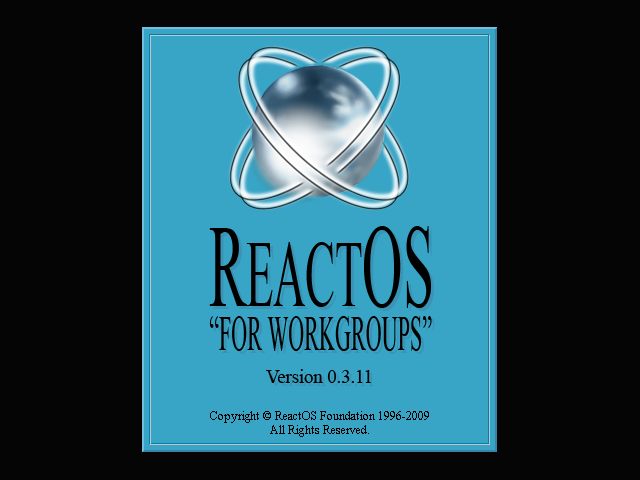
<style>
.page{position:relative;width:640px;height:480px;background:#050505}
.page>*{position:absolute;margin:0}
.t1{font:94.6px "TimesNewRomanPSMT";color:#000000;scale:0.47 1}
.t2{font:118.1px "TimesNewRomanPSMT";color:#000000;scale:0.47 1}
.t3{font:49.8px "TimesNewRomanPSMT";color:#000000;scale:0.44 1}
.t4{font:19.9px "TimesNewRomanPSMT";color:#000000;scale:0.93 1}
.t5{font:13px/13.9px "TimesNewRomanPSMT";color:#000000;scale:0.93 1}
</style>
<div class="page">
<p class="t1" style="left:209px;top:226px;width:222px;height:82px"><span class="t2">R</span>EACT<span class="t2">OS</span></p>
<p class="t3" style="left:209px;top:316px;width:223px;height:35px">“FOR WORKGROUPS”</p>
<p class="t4" style="left:266px;top:369px;width:105px;height:14px">Version 0.3.11</p>
<p class="t5" style="left:210px;top:411px;width:219px;height:26px;text-align:center">Copyright © ReactOS Foundation 1996-2009<br>All Rights Reserved.</p>
</div>
